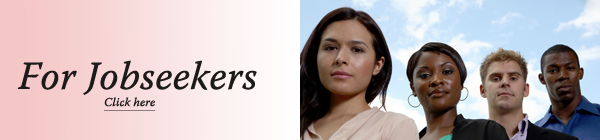
<style>
.page{position:relative;width:600px;height:140px}
.page>*{position:absolute;margin:0}
.t1{font:40px "WarnockPro-ItCapt";color:#1d1a1a}
.t2{font:12px "WarnockPro-ItCapt";color:#1d1a1a;text-decoration:underline}
</style>
<div class="page">
<p class="t1" style="left:17px;top:60px;width:240px;height:35px">For Jobseekers</p>
<p class="t2" style="left:104px;top:97px;width:52px;height:14px">Click here</p>
</div>
